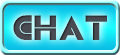
<style>
.page{position:relative;width:120px;height:55px}
.page>*{position:absolute;margin:0}
.t1{font:36px "CSBlocks";color:#494b52}
</style>
<div class="page">
<p class="t1" style="left:13px;top:15px;width:94px;height:25px">chat</p>
</div>
